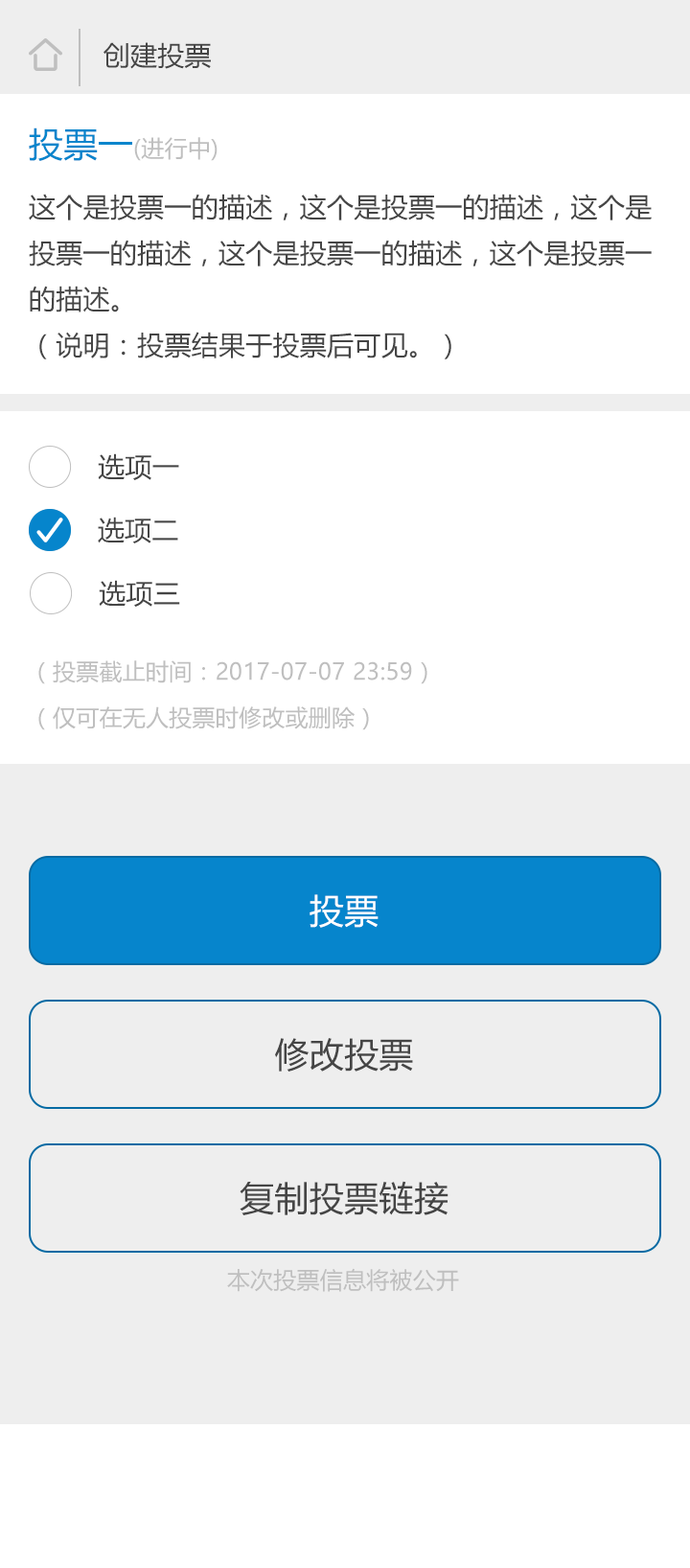
<style>
.page{position:relative;width:690px;height:1568px;background:#ffffff}
.page>*{position:absolute;margin:0}
.t1{font:26.8px "MicrosoftYaHeiUI";letter-spacing:0.01em;color:#454545}
.t2{font:23px "MicrosoftYaHeiUI";letter-spacing:0.01em;color:#bfbfbf}
.t3{font:34.5px "MicrosoftYaHeiUI";letter-spacing:0.01em;color:#0685cc}
.t4{font:26.8px/46px "MicrosoftYaHeiUI";letter-spacing:0.01em;color:#454545}
.t5{font:23px/46px "MicrosoftYaHeiUI";letter-spacing:0.01em;color:#bfbfbf}
.t6{font:34.5px "MicrosoftYaHeiUI";letter-spacing:0.01em;color:#ffffff}
.t7{font:34.5px "MicrosoftYaHeiUI";letter-spacing:0.01em;color:#454545}
</style>
<div class="page">
<p class="t1" style="left:104px;top:42px;width:107px;height:27px">创建投票</p>
<p class="t2" style="left:29px;top:127px;width:189px;height:34px"><span class="t3">投票一</span>(进行中)</p>
<p class="t4" style="left:29px;top:194px;width:623px;height:165px">这个是投票一的描述，这个是投票一的描述，这个是<br>投票一的描述，这个是投票一的描述，这个是投票一<br>的描述。<br>（说明：投票结果于投票后可见。）</p>
<p class="t1" style="left:98px;top:453px;width:81px;height:27px">选项一</p>
<p class="t1" style="left:98px;top:517px;width:80px;height:26px">选项二</p>
<p class="t1" style="left:99px;top:580px;width:81px;height:27px">选项三</p>
<p class="t5" style="left:38px;top:660px;width:389px;height:70px">（投票截止时间：2017-07-07 23:59）<br>（仅可在无人投票时修改或删除）</p>
<p class="t6" style="left:310px;top:894px;width:69px;height:34px">投票</p>
<p class="t7" style="left:275px;top:1038px;width:138px;height:34px">修改投票</p>
<p class="t7" style="left:240px;top:1181px;width:209px;height:34px">复制投票链接</p>
<p class="t2" style="left:227px;top:1268px;width:232px;height:24px">本次投票信息将被公开</p>
</div>
